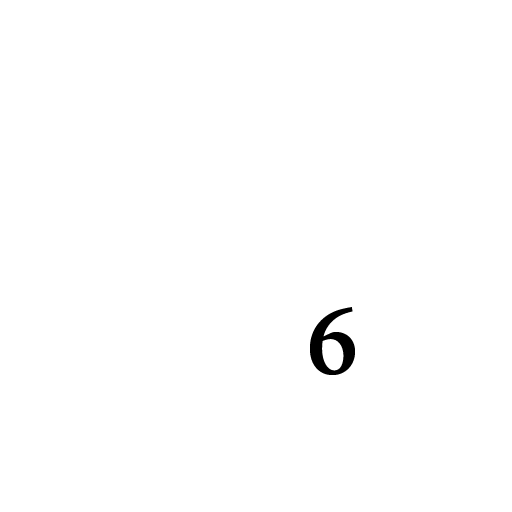
<style>
.page{position:relative;width:512px;height:512px;background:#ffffff}
.page>*{position:absolute;margin:0}
.t1{font:112px "AdobeGurmukhi-Bold";color:#000000}
</style>
<div class="page">
<p class="t1" style="left:310px;top:307px;width:45px;height:68px">6</p>
</div>
